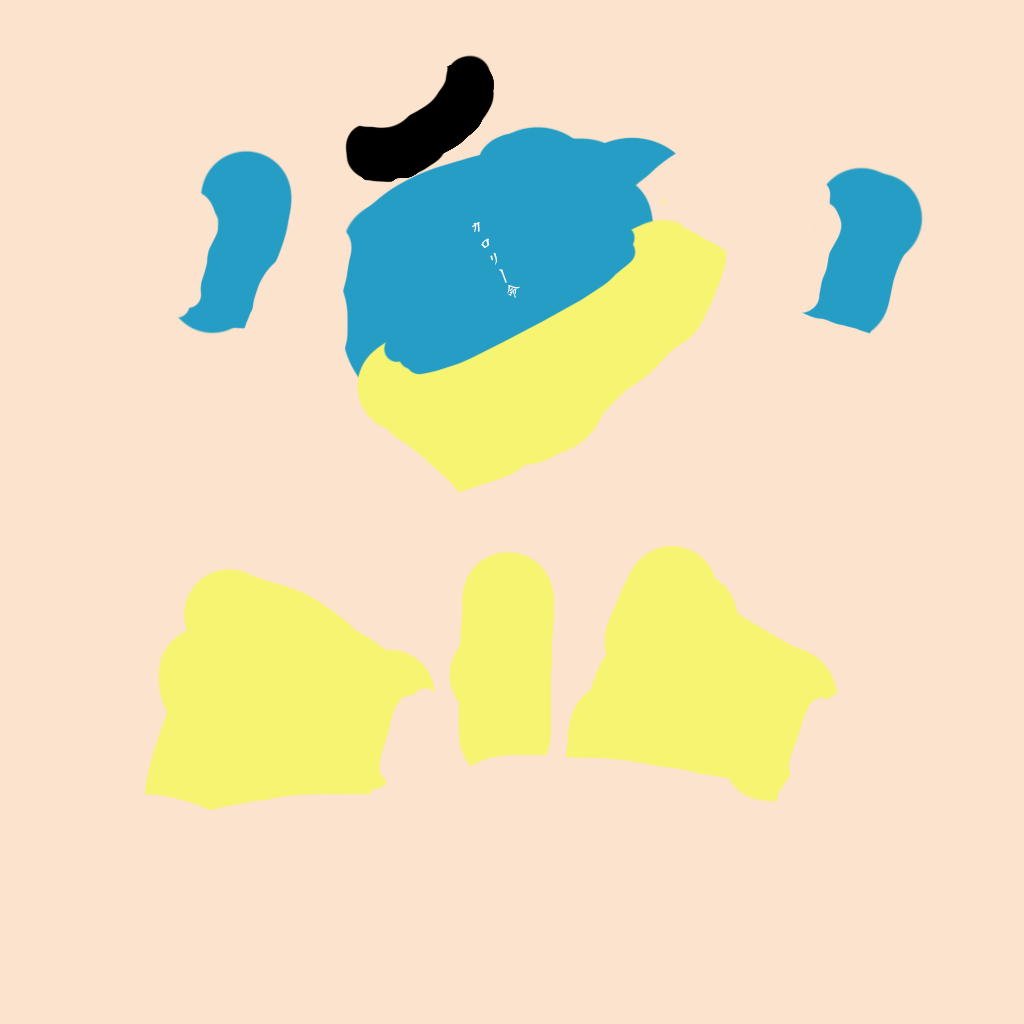
<style>
.page{position:relative;width:1024px;height:1024px;background:#fce3cd}
.page>*{position:absolute;margin:0}
.t1{font:17.2px "AoyagiKouzanFontT";letter-spacing:0.06em;color:#ffffff;font-style:italic}
</style>
<div class="page">
<p class="t1" style="left:472px;top:222px;width:48px;height:76px;rotate:-30deg">カロリー命</p>
</div>
